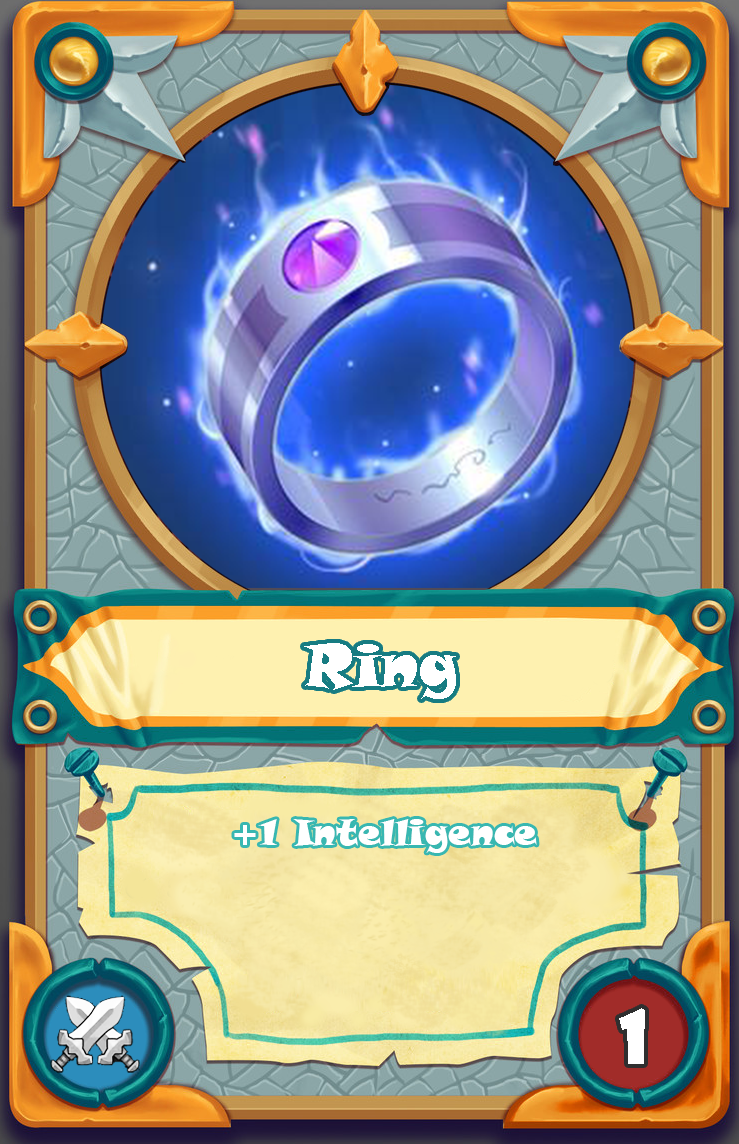
<style>
.page{position:relative;width:739px;height:1144px}
.page>*{position:absolute;margin:0}
.t1{font:60px "SnapITC-Regular";color:#ffffff}
.t2{font:36px "SnapITC-Regular";color:#ffffff}
.t3{font:72px "ShowcardGothic-Reg";color:#ffffff}
</style>
<div class="page">
<p class="t1" style="left:304px;top:643px;width:152px;height:56px">Ring</p>
<p class="t2" style="left:234px;top:819px;width:303px;height:34px">+1 Intelligence</p>
<p class="t3" style="left:619px;top:1008px;width:26px;height:56px">1</p>
</div>
